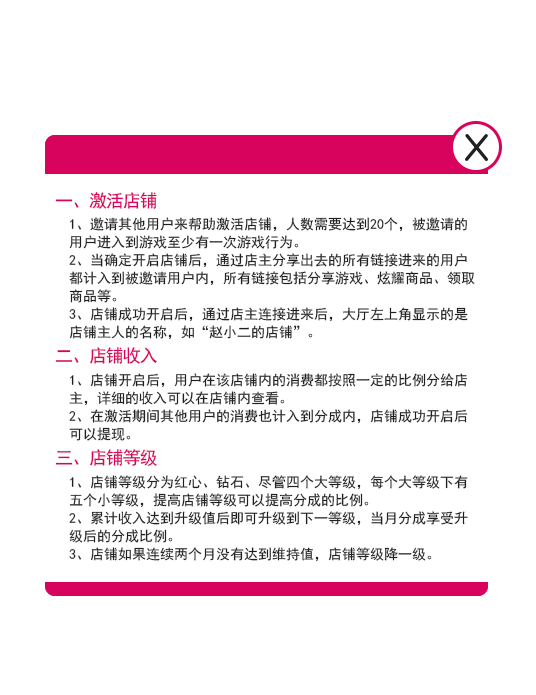
<style>
.page{position:relative;width:536px;height:695px;background:#ffffff}
.page>*{position:absolute;margin:0}
.t1{font:18px "SimHei";letter-spacing:-0.059em;color:#d8035d}
.t2{font:14px/18px "SimHei";color:#202020}
</style>
<div class="page">
<p class="t1" style="left:55px;top:192px;width:102px;height:17px">一、激活店铺</p>
<p class="t2" style="left:69px;top:217px;width:406px;height:123px">1、邀请其他用户来帮助激活店铺，人数需要达到20个，被邀请的<br>用户进入到游戏至少有一次游戏行为。<br>2、当确定开启店铺后，通过店主分享出去的所有链接进来的用户<br>都计入到被邀请用户内，所有链接包括分享游戏、炫耀商品、领取<br>商品等。<br>3、店铺成功开启后，通过店主连接进来后，大厅左上角显示的是<br>店铺主人的名称，如“赵小二的店铺”。</p>
<p class="t1" style="left:55px;top:347px;width:102px;height:17px">二、店铺收入</p>
<p class="t2" style="left:69px;top:373px;width:399px;height:68px">1、店铺开启后，用户在该店铺内的消费都按照一定的比例分给店<br>主，详细的收入可以在店铺内查看。<br>2、在激活期间其他用户的消费也计入到分成内，店铺成功开启后<br>可以提现。</p>
<p class="t1" style="left:55px;top:449px;width:102px;height:17px">三、店铺等级</p>
<p class="t2" style="left:69px;top:475px;width:399px;height:87px">1、店铺等级分为红心、钻石、尽管四个大等级，每个大等级下有<br>五个小等级，提高店铺等级可以提高分成的比例。<br>2、累计收入达到升级值后即可升级到下一等级，当月分成享受升<br>级后的分成比例。<br>3、店铺如果连续两个月没有达到维持值，店铺等级降一级。</p>
</div>
